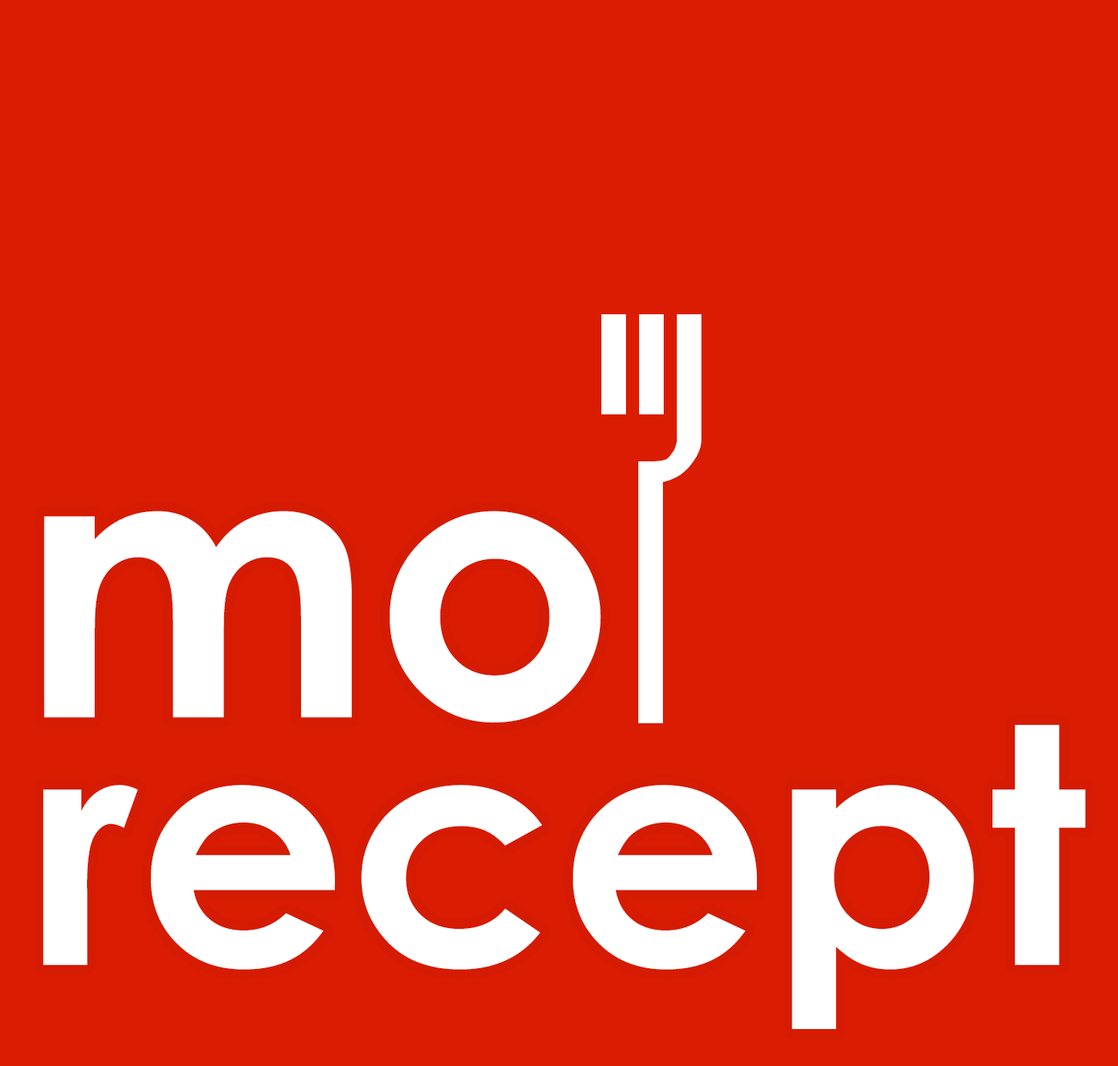
<style>
.page{position:relative;width:1118px;height:1066px;background:#da1c03}
.page>*{position:absolute;margin:0}
.t1{font:377.8px "CenturyGothic-Bold";color:#ffffff}
.t2{font:329.8px "CenturyGothic-Bold";color:#ffffff}
</style>
<div class="page">
<p class="t1" style="left:44px;top:511px;width:557px;height:212px">mo</p>
<p class="t2" style="left:43px;top:725px;width:1043px;height:304px">recept</p>
</div>
